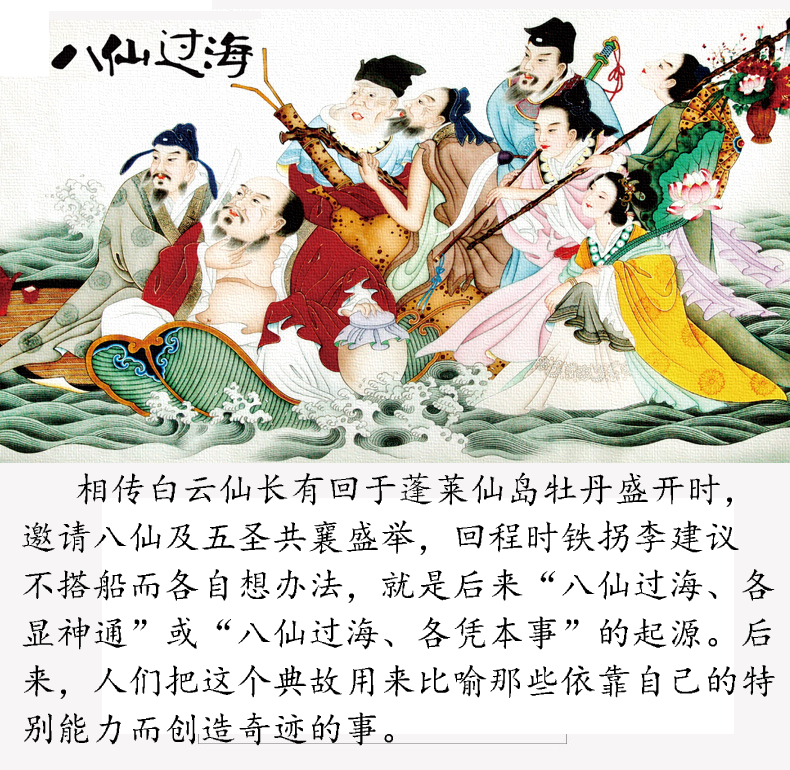
<style>
.page{position:relative;width:790px;height:770px;background:#ffffff}
.page>*{position:absolute;margin:0}
.t1{font:36px/48px "¿¬Ìå-Regular";color:#000000}
</style>
<div class="page">
<p class="t1" style="left:22px;top:472px;width:753px;height:274px">相传白云仙长有回于蓬莱仙岛牡丹盛开时，<br>邀请八仙及五圣共襄盛举，回程时铁拐李建议<br>不搭船而各自想办法，就是后来“八仙过海、各<br>显神通”或“八仙过海、各凭本事”的起源。后<br>来，人们把这个典故用来比喻那些依靠自己的特<br>别能力而创造奇迹的事。</p>
</div>
